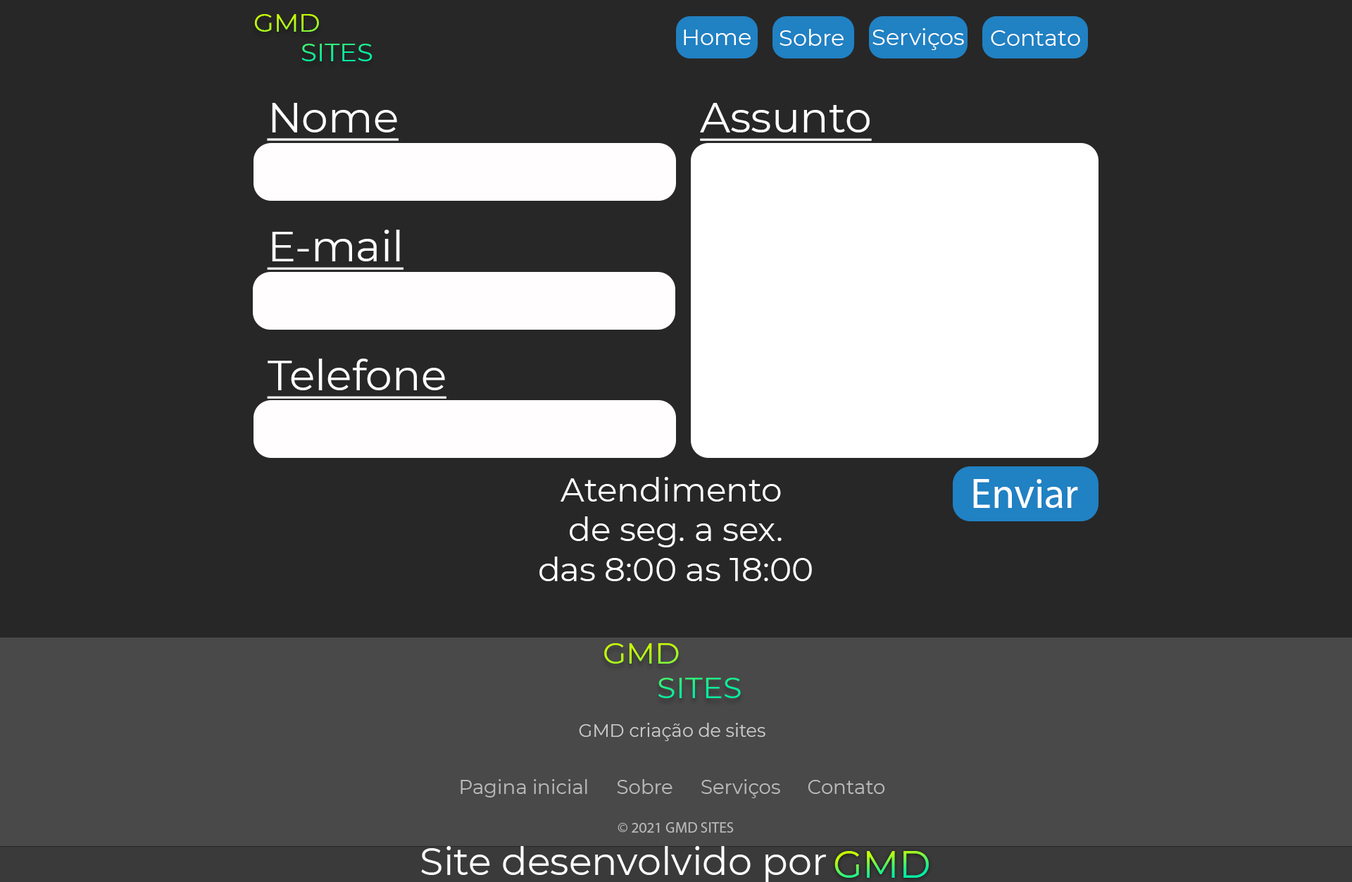
<style>
.page{position:relative;width:1352px;height:882px;background:#272727}
.page>*{position:absolute;margin:0}
.t1{font:24.7px "Montserrat-Regular";scale:1.06 1}
.t2{font:22.5px "Montserrat-Regular";color:#ffffff}
.t3{font:42.3px "Montserrat-Regular";color:#ffffff;text-decoration:underline}
.t4{font:33.1px "Montserrat-Regular";color:#ffffff}
.t5{font:42.3px "MyriadPro-Regular";color:#ffffff}
.t6{font:28.6px "Montserrat-Regular";scale:1.06 1}
.t7{font:17.9px "Montserrat-Regular";color:#cacaca}
.t8{font:19.4px "Montserrat-Regular";color:#b9b8b8}
.t9{font:15.1px "MyriadPro-Regular";color:#b9b8b8}
.t10{font:38.1px "Montserrat-Regular";color:#ffffff}
.t11{font:38.1px "Montserrat-Regular"}
</style>
<div class="page">
<p class="t1" style="left:254px;top:14px;width:119px;height:47px">GMD<br>   SITES</p>
<p class="t2" style="left:684px;top:30px;width:67px;height:15px">Home</p>
<p class="t2" style="left:780px;top:29px;width:64px;height:17px">Sobre</p>
<p class="t2" style="left:873px;top:28px;width:91px;height:22px">Serviços</p>
<p class="t2" style="left:991px;top:30px;width:89px;height:16px">Contato</p>
<p class="t3" style="left:267px;top:103px;width:132px;height:38px">Nome</p>
<p class="t3" style="left:700px;top:103px;width:172px;height:38px">Assunto</p>
<p class="t3" style="left:267px;top:230px;width:137px;height:40px">E-mail</p>
<p class="t3" style="left:267px;top:358px;width:180px;height:41px">Telefone</p>
<p class="t4" style="left:540px;top:477px;width:272px;height:104px;text-align:center">Atendimento<br> de seg. a sex.<br> das 8:00 as 18:00</p>
<p class="t5" style="left:973px;top:479px;width:105px;height:29px">Enviar</p>
<p class="t6" style="left:604px;top:643px;width:137px;height:55px">GMD<br>   SITES</p>
<p class="t7" style="left:579px;top:723px;width:187px;height:18px">GMD criação de sites</p>
<p class="t8" style="left:461px;top:779px;width:126px;height:18px">Pagina inicial</p>
<p class="t8" style="left:617px;top:779px;width:56px;height:15px">Sobre</p>
<p class="t8" style="left:701px;top:779px;width:79px;height:19px">Serviços</p>
<p class="t8" style="left:808px;top:780px;width:77px;height:14px">Contato</p>
<p class="t9" style="left:618px;top:822px;width:116px;height:10px">© 2021 GMD SITES</p>
<p class="t10" style="left:421px;top:846px;width:405px;height:37px">Site desenvolvido por</p>
<p class="t11" style="left:835px;top:851px;width:94px;height:27px">GMD</p>
</div>
